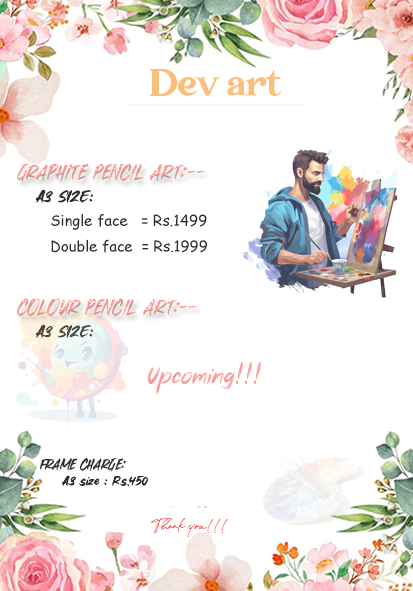
<style>
.page{position:relative;width:413px;height:591px;background:#ffffff}
.page>*{position:absolute;margin:0}
.t1{font:48px "Transcity";color:#f9bf7c}
.t2{font:21px "UncaredPERSONALUSEONLY!"}
.t3{font:18px "AutumnBrush";color:#2c2e2d}
.t4{font:14.8px "ComicSansMS";color:#2c2e2d}
.t5{font:18px "AutumnBrush"}
.t6{font:25.6px "AutumnBrush";color:#f99796}
.t7{font:15px "UncaredPERSONALUSEONLY!";color:#2c2e2d}
.t8{font:14px "AutumnBrush";color:#2c2e2d}
.t9{font:18px "WoodsenSignature";color:#f84c51}
</style>
<div class="page">
<p class="t1" style="left:149px;top:69px;width:133px;height:27px">Dev art</p>
<p class="t2" style="left:17px;top:163px;width:188px;height:19px">Graphite pencil art:--</p>
<p class="t3" style="left:35px;top:189px;width:58px;height:14px">A3 SIZE:</p>
<p class="t4" style="left:51px;top:214px;width:156px;height:16px">Single face   = Rs.1499</p>
<p class="t4" style="left:51px;top:239px;width:156px;height:14px">Double face  = Rs.1999</p>
<p class="t2" style="left:16px;top:298px;width:181px;height:18px">COLOUR PENCIL ART:--</p>
<p class="t5" style="left:35px;top:324px;width:58px;height:14px">A3 SIZE:</p>
<p class="t6" style="left:147px;top:361px;width:115px;height:34px">Upcoming!!!</p>
<p class="t7" style="left:40px;top:458px;width:86px;height:14px">Frame charge:</p>
<p class="t8" style="left:62px;top:475px;width:86px;height:11px">A3 size : Rs.450</p>
<p class="t9" style="left:151px;top:517px;width:77px;height:20px">Thank you!!!</p>
</div>
